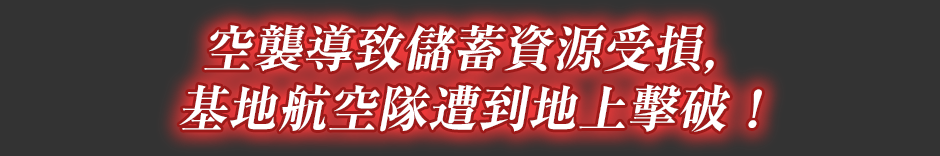
<style>
.page{position:relative;width:940px;height:156px;background:#333333}
.page>*{position:absolute;margin:0}
.t1{font:50px/60px "RyuminPr6N-ExBold";color:#ffffff;font-style:italic}
</style>
<div class="page">
<p class="t1" style="left:179px;top:24px;width:583px;height:108px;text-align:center">空襲導致儲蓄資源受損，<br>基地航空隊遭到地上擊破！</p>
</div>
